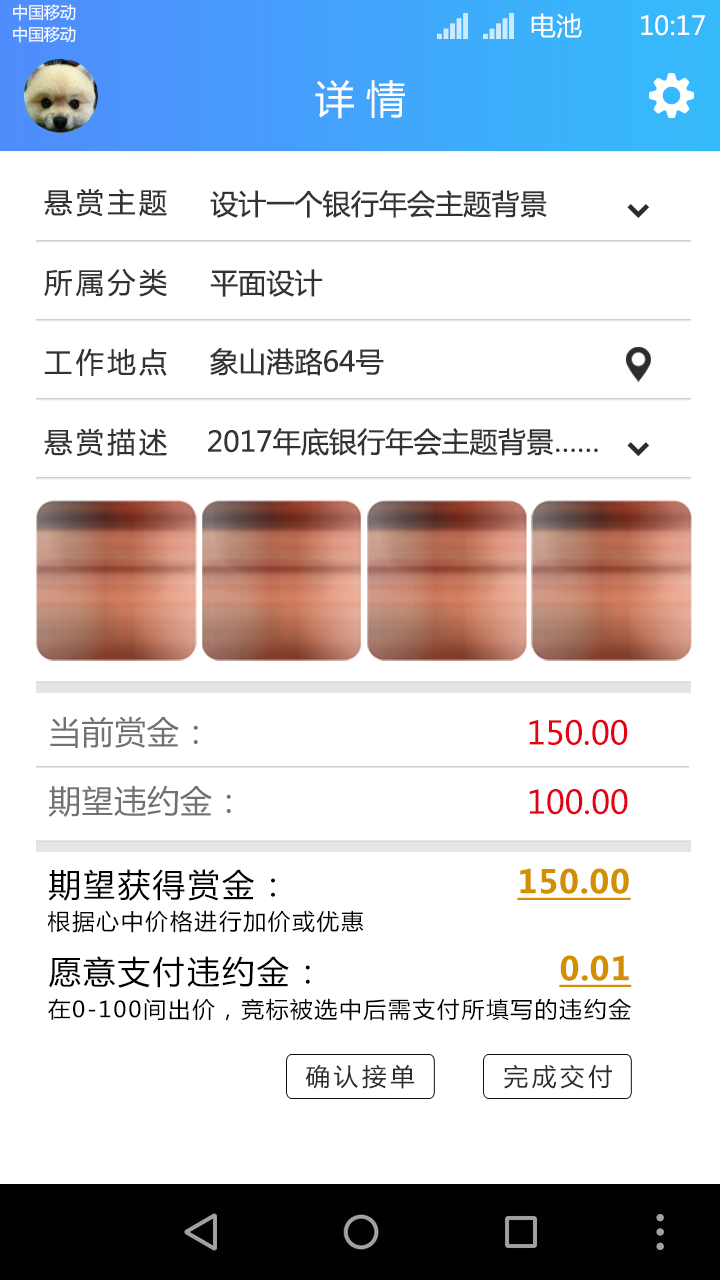
<style>
.page{position:relative;width:720px;height:1280px;background:#ffffff}
.page>*{position:absolute;margin:0}
.t1{font:16.2px "MicrosoftYaHei";color:#ffffff;text-transform:uppercase}
.t2{font:26.1px "MicrosoftYaHei";color:#ffffff;text-transform:uppercase}
.t3{font:39.5px "MicrosoftYaHei";color:#ffffff;text-transform:uppercase}
.t4{font:28.1px/79.9px "MicrosoftYaHei";color:#333333}
.t5{font:28.1px "MicrosoftYaHei";color:#333333}
.t6{font:31.9px "MicrosoftYaHei";color:#727171}
.t7{font:31.9px "MicrosoftYaHei";color:#e60012}
.t8{font:31.9px "MicrosoftYaHei";letter-spacing:0.08em;color:#000000}
.t9{font:31.9px "MicrosoftYaHei-Bold";color:#d28f00;text-decoration:underline}
.t10{font:22.2px "MicrosoftYaHei";letter-spacing:0.08em;color:#000000}
.t11{font:24.5px "MicrosoftYaHei";letter-spacing:0.15em;color:#2b2c2c}
</style>
<div class="page">
<p class="t1" style="left:13px;top:4px;width:63px;height:17px">中国移动</p>
<p class="t2" style="left:531px;top:13px;width:51px;height:25px">电池</p>
<p class="t2" style="left:641px;top:15px;width:64px;height:21px">10:17</p>
<p class="t1" style="left:13px;top:26px;width:63px;height:17px">中国移动</p>
<p class="t3" style="left:315px;top:80px;width:90px;height:39px">详 情</p>
<p class="t4" style="left:44px;top:188px;width:123px;height:269px;text-align:justify">悬赏主题<br>所属分类<br>工作地点<br>悬赏描述</p>
<p class="t5" style="left:210px;top:190px;width:337px;height:28px">设计一个银行年会主题背景</p>
<p class="t5" style="left:210px;top:269px;width:113px;height:28px">平面设计</p>
<p class="t5" style="left:210px;top:348px;width:174px;height:28px">象山港路64号</p>
<p class="t5" style="left:208px;top:428px;width:390px;height:28px">2017年底银行年会主题背景……</p>
<p class="t6" style="left:50px;top:716px;width:148px;height:32px">当前赏金：</p>
<p class="t7" style="left:529px;top:719px;width:99px;height:26px">150.00</p>
<p class="t6" style="left:48px;top:785px;width:183px;height:32px">期望违约金：</p>
<p class="t7" style="left:529px;top:789px;width:99px;height:26px">100.00</p>
<p class="t8" style="left:48px;top:869px;width:227px;height:32px">期望获得赏金：</p>
<p class="t9" style="left:517px;top:868px;width:114px;height:32px">150.00</p>
<p class="t10" style="left:47px;top:910px;width:317px;height:23px">根据心中价格进行加价或优惠</p>
<p class="t8" style="left:49px;top:956px;width:261px;height:32px">愿意支付违约金：</p>
<p class="t9" style="left:559px;top:955px;width:73px;height:32px">0.01</p>
<p class="t10" style="left:48px;top:998px;width:583px;height:23px">在0-100间出价，竞标被选中后需支付所填写的违约金</p>
<p class="t11" style="left:305px;top:1064px;width:110px;height:25px">确认接单</p>
<p class="t11" style="left:504px;top:1064px;width:108px;height:25px">完成交付</p>
</div>
